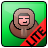
<style>
.page{position:relative;width:48px;height:48px}
.page>*{position:absolute;margin:0}
.t1{font:12.5px "FranklinGothic-Medium";color:#000000}
</style>
<div class="page">
<p class="t1" style="left:25px;top:26px;width:22px;height:22px;rotate:-45deg">LITE</p>
</div>
